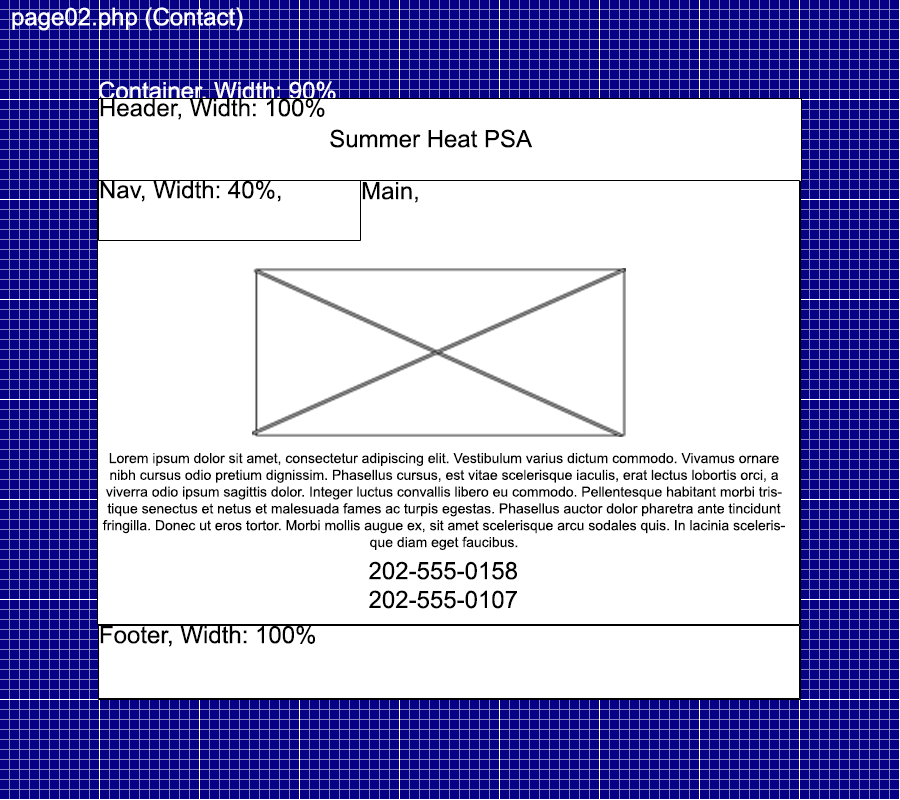
<style>
.page{position:relative;width:900px;height:800px;background:#ffffff}
.page>*{position:absolute;margin:0}
.t1{font:24px "ArialMT";color:#ffffff}
.t2{font:24px "ArialMT";color:#000000}
.t3{font:14px "ArialMT";color:#000000}
</style>
<div class="page">
<p class="t1" style="left:12px;top:7px;width:231px;height:24px">page02.php (Contact)</p>
<p class="t1" style="left:99px;top:81px;width:237px;height:22px">Container, Width: 90%</p>
<p class="t2" style="left:100px;top:98px;width:225px;height:22px">Header, Width: 100%</p>
<p class="t2" style="left:330px;top:129px;width:203px;height:19px">Summer Heat PSA</p>
<p class="t2" style="left:100px;top:180px;width:181px;height:22px">Nav, Width: 40%,</p>
<p class="t2" style="left:362px;top:182px;width:56px;height:21px">Main,</p>
<p class="t3" style="left:102px;top:453px;width:683px;height:97px;text-align:center">Lorem ipsum dolor sit amet, consectetur adipiscing elit. Vestibulum varius dictum commodo. Vivamus ornare nibh cursus odio pretium dignissim. Phasellus cursus, est vitae scelerisque iaculis, erat lectus lobortis orci, a viverra odio ipsum sagittis dolor. Integer luctus convallis libero eu commodo. Pellentesque habitant morbi tristique senectus et netus et malesuada fames ac turpis egestas. Phasellus auctor dolor pharetra ante tincidunt fringilla. Donec ut eros tortor. Morbi mollis augue ex, sit amet scelerisque arcu sodales quis. In lacinia scelerisque diam eget faucibus.</p>
<p class="t2" style="left:369px;top:561px;width:148px;height:48px;text-align:center">202-555-0158<br>202-555-0107</p>
<p class="t2" style="left:100px;top:625px;width:215px;height:22px">Footer, Width: 100%</p>
</div>
